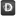
<style>
.page{position:relative;width:16px;height:16px}
.page>*{position:absolute;margin:0}
.t1{font:12px "Corbel";color:#ffffff;font-weight:bold}
</style>
<div class="page">
<p class="t1" style="left:5px;top:3px;width:7px;height:9px">D</p>
</div>
